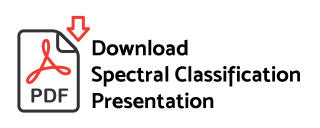
<style>
.page{position:relative;width:320px;height:128px;background:#ffffff}
.page>*{position:absolute;margin:0}
.t1{font:22px "MoskBold700";color:#000000}
</style>
<div class="page">
<p class="t1" style="left:91px;top:39px;width:209px;height:70px">Download<br>Spectral Classification<br>Presentation</p>
</div>
